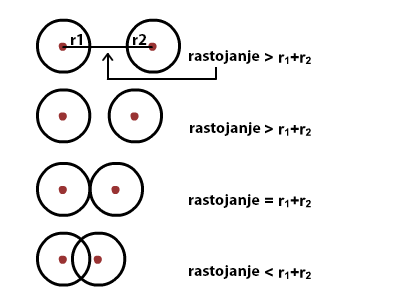
<style>
.page{position:relative;width:400px;height:300px;background:#ffffff}
.page>*{position:absolute;margin:0}
.t1{font:16px "MyriadPro-Bold";color:#000000}
</style>
<div class="page">
<p class="t1" style="left:71px;top:34px;width:11px;height:11px">r1</p>
<p class="t1" style="left:133px;top:34px;width:14px;height:11px">r2</p>
<p class="t1" style="left:189px;top:50px;width:71px;height:14px">rastojanje</p>
<p class="t1" style="left:190px;top:122px;width:71px;height:14px">rastojanje</p>
<p class="t1" style="left:189px;top:194px;width:71px;height:14px">rastojanje</p>
<p class="t1" style="left:189px;top:265px;width:71px;height:14px">rastojanje</p>
</div>
